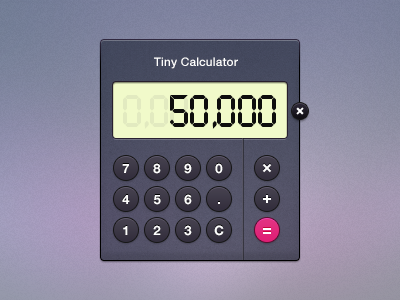
<style>
.page{position:relative;width:400px;height:300px}
.page>*{position:absolute;margin:0}
.t1{font:12px "HelveticaNeue-Medium";letter-spacing:0.005em;color:#ffffff}
.t2{font:40px "LiquidCrystal-Bold";letter-spacing:0.005em;color:#e2eac0;scale:0.97 1}
.t3{font:40px "LiquidCrystal-Bold";letter-spacing:0.005em;scale:0.97 1}
.t4{font:40px "LiquidCrystal-Bold";letter-spacing:0.005em;color:#0e0d0d;scale:0.97 1}
.t5{font:13px "HelveticaNeue-Bold";letter-spacing:0.005em;color:#fefefe}
</style>
<div class="page">
<p class="t1" style="left:154px;top:57px;width:84px;height:12px">Tiny Calculator</p>
<p class="t2" style="left:123px;top:95px;width:26px;height:34px">0,</p>
<p class="t2" style="left:150px;top:95px;width:18px;height:32px">0</p>
<p class="t3" style="left:170px;top:95px;width:18px;height:32px">0</p>
<p class="t4" style="left:170px;top:95px;width:106px;height:34px">50,000</p>
<p class="t5" style="left:122px;top:164px;width:7px;height:9px">7</p>
<p class="t5" style="left:153px;top:163px;width:8px;height:11px">8</p>
<p class="t5" style="left:184px;top:163px;width:8px;height:11px">9</p>
<p class="t5" style="left:215px;top:163px;width:8px;height:11px">0</p>
<p class="t5" style="left:122px;top:195px;width:8px;height:9px">4</p>
<p class="t5" style="left:153px;top:195px;width:8px;height:10px">5</p>
<p class="t5" style="left:184px;top:194px;width:8px;height:11px">6</p>
<p class="t5" style="left:123px;top:226px;width:5px;height:9px">1</p>
<p class="t5" style="left:153px;top:225px;width:8px;height:10px">2</p>
<p class="t5" style="left:184px;top:225px;width:8px;height:11px">3</p>
<p class="t5" style="left:214px;top:225px;width:10px;height:11px">C</p>
</div>
